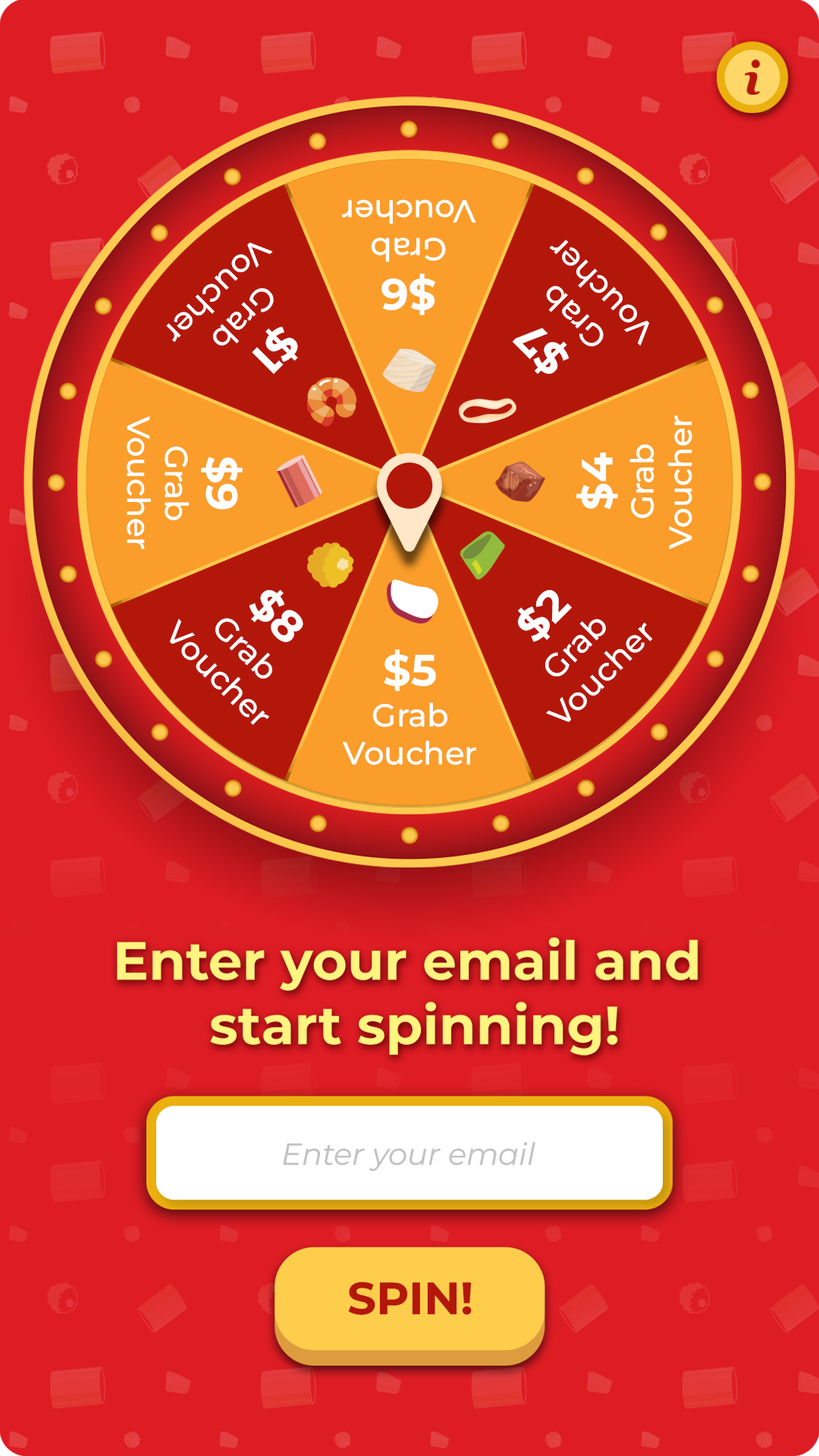
<style>
.page{position:relative;width:819px;height:1456px;background:#de1c24}
.page>*{position:absolute;margin:0}
.t1{font:31.7px "MontserratRoman-Medium";color:#ffffff}
.t2{font:43.6px/41.2px "MontserratRoman-Bold";color:#ffffff}
.t3{font:31.7px/41.2px "MontserratRoman-Medium";color:#ffffff}
.t4{font:30.4px "MontserratItalic-Italic";color:#c2c2c2}
.t5{font:45.1px "MontserratRoman-Bold";color:#b3170a}
</style>
<div class="page">
<p class="t1" style="left:342px;top:199px;width:134px;height:116px;text-align:center"><span class="t2">$6<br></span><span class="t3">Grab<br></span>Voucher</p>
<p class="t1" style="left:166px;top:243px;width:132px;height:131px;text-align:center"><span class="t2">$1<br></span><span class="t3">Grab<br></span>Voucher</p>
<p class="t1" style="left:512px;top:240px;width:137px;height:134px;text-align:center"><span class="t2">$7<br></span><span class="t3">Grab<br></span>Voucher</p>
<p class="t1" style="left:127px;top:416px;width:116px;height:133px;text-align:center"><span class="t2">$9<br></span><span class="t3">Grab<br></span>Voucher</p>
<p class="t1" style="left:576px;top:416px;width:116px;height:133px;text-align:center"><span class="t2">$4<br></span><span class="t3">Grab<br></span>Voucher</p>
<p class="t1" style="left:170px;top:590px;width:133px;height:135px;text-align:center"><span class="t2">$8<br></span><span class="t3">Grab<br></span>Voucher</p>
<p class="t1" style="left:518px;top:590px;width:135px;height:132px;text-align:center"><span class="t2">$2<br></span><span class="t3">Grab<br></span>Voucher</p>
<p class="t1" style="left:343px;top:649px;width:133px;height:116px;text-align:center"><span class="t2">$5<br></span><span class="t3">Grab<br></span>Voucher</p>
<p class="t4" style="left:283px;top:1142px;width:252px;height:30px">Enter your email</p>
<p class="t5" style="left:348px;top:1282px;width:124px;height:33px">SPIN!</p>
</div>
